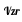
<style>
.page{position:relative;width:22px;height:22px;background:#ffffff}
.page>*{position:absolute;margin:0}
.t1{font:11px "Lobster-Regular";color:#000000}
</style>
<div class="page">
<p class="t1" style="left:4px;top:6px;width:16px;height:9px">Vzr</p>
</div>
